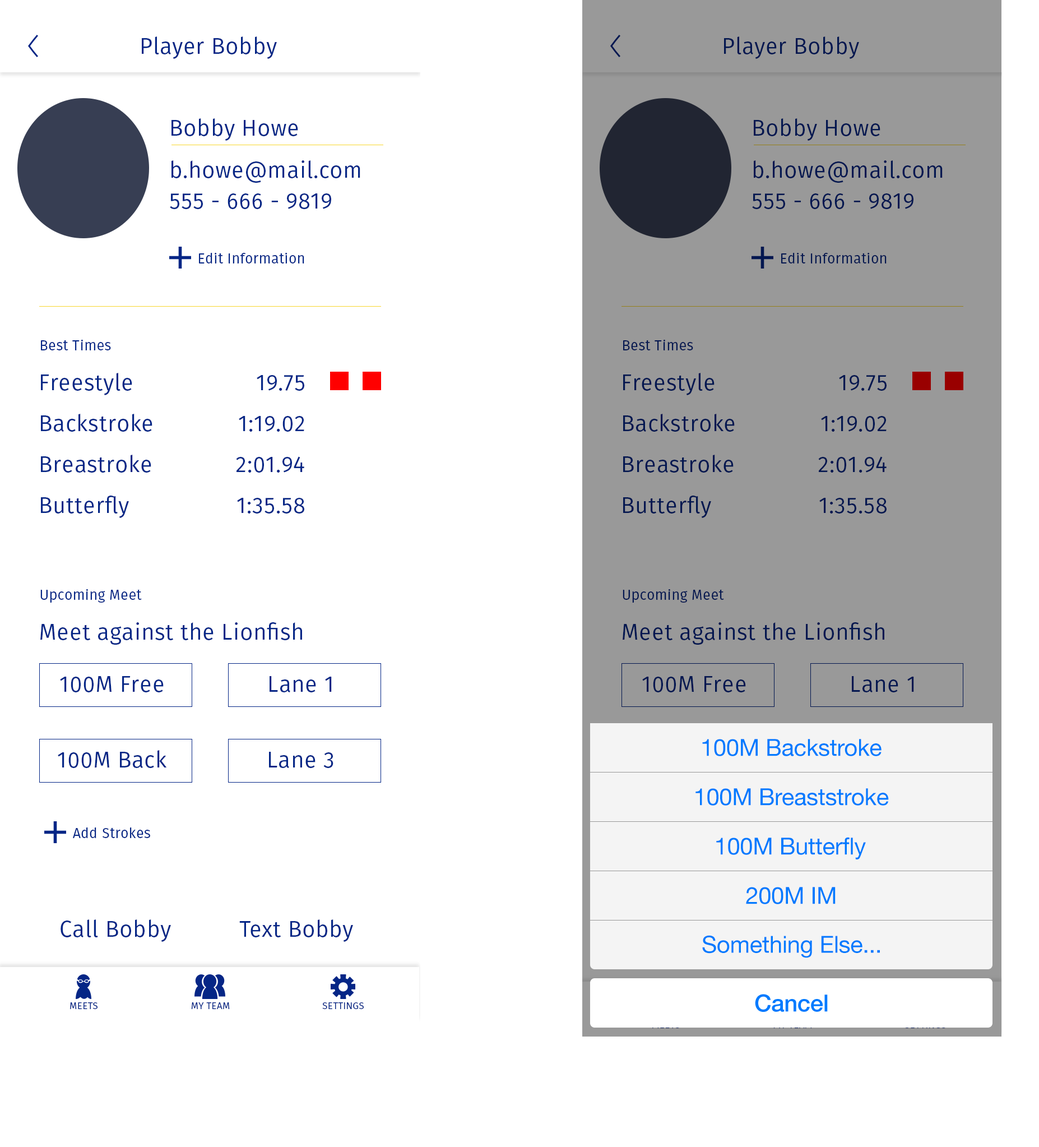
<style>
.page{position:relative;width:1039px;height:1147px;background:#ffffff}
.page>*{position:absolute;margin:0}
.t1{font:22.4px "FiraSans-Book";letter-spacing:0.02em;color:#052686}
.t2{font:22.4px "FiraSans-Book";letter-spacing:0.02em;color:#031750}
.t3{font:22.4px/19.6px "FiraSans-Book";letter-spacing:0.02em;color:#052686}
.t4{font:22.4px/19.6px "FiraSans-Book";letter-spacing:0.02em;color:#031750}
.t5{font:14px "FiraSans-Book";letter-spacing:0.02em;color:#052686}
.t6{font:14px "FiraSans-Book";letter-spacing:0.02em;color:#031750}
.t7{font:23.5px "HelveticaNeue";letter-spacing:-0.01em;color:#007aff}
.t8{font:23.5px "HelveticaNeue-Medium";letter-spacing:-0.01em;color:#007aff}
.t9{font:9.5px "FiraSans-Book";letter-spacing:0.02em;color:#052686;text-transform:uppercase}
</style>
<div class="page">
<p class="t1" style="left:142px;top:36px;width:135px;height:23px">Player Bobby</p>
<p class="t2" style="left:724px;top:36px;width:136px;height:23px">Player Bobby</p>
<p class="t3" style="left:170px;top:118px;width:191px;height:91px">Bobby Howe<br>b.howe@mail.com<br>555 - 666 - 9819</p>
<p class="t4" style="left:752px;top:118px;width:191px;height:91px">Bobby Howe<br>b.howe@mail.com<br>555 - 666 - 9819</p>
<p class="t5" style="left:199px;top:252px;width:105px;height:12px">Edit Information</p>
<p class="t6" style="left:782px;top:252px;width:105px;height:12px">Edit Information</p>
<p class="t5" style="left:41px;top:339px;width:70px;height:11px">Best Times</p>
<p class="t6" style="left:623px;top:339px;width:71px;height:11px">Best Times</p>
<p class="t1" style="left:41px;top:373px;width:91px;height:22px">Freestyle</p>
<p class="t1" style="left:257px;top:375px;width:47px;height:16px">19.75</p>
<p class="t2" style="left:623px;top:373px;width:92px;height:22px">Freestyle</p>
<p class="t2" style="left:839px;top:375px;width:48px;height:16px">19.75</p>
<p class="t1" style="left:41px;top:414px;width:112px;height:18px">Backstroke</p>
<p class="t2" style="left:623px;top:414px;width:112px;height:18px">Backstroke</p>
<p class="t1" style="left:239px;top:416px;width:65px;height:16px">1:19.02</p>
<p class="t2" style="left:821px;top:416px;width:66px;height:16px">1:19.02</p>
<p class="t1" style="left:41px;top:455px;width:110px;height:18px">Breastroke</p>
<p class="t1" style="left:236px;top:456px;width:68px;height:17px">2:01.94</p>
<p class="t2" style="left:623px;top:455px;width:111px;height:18px">Breastroke</p>
<p class="t2" style="left:819px;top:456px;width:68px;height:17px">2:01.94</p>
<p class="t1" style="left:41px;top:496px;width:88px;height:22px">Butterfly</p>
<p class="t1" style="left:237px;top:498px;width:67px;height:16px">1:35.58</p>
<p class="t2" style="left:623px;top:496px;width:88px;height:22px">Butterfly</p>
<p class="t2" style="left:820px;top:498px;width:67px;height:16px">1:35.58</p>
<p class="t5" style="left:40px;top:589px;width:102px;height:14px">Upcoming Meet</p>
<p class="t6" style="left:623px;top:589px;width:101px;height:14px">Upcoming Meet</p>
<p class="t1" style="left:40px;top:622px;width:262px;height:23px">Meet against the Lionfish</p>
<p class="t2" style="left:623px;top:622px;width:262px;height:23px">Meet against the Lionfish</p>
<p class="t1" style="left:60px;top:676px;width:104px;height:16px">100M Free</p>
<p class="t1" style="left:270px;top:676px;width:62px;height:16px">Lane 1</p>
<p class="t2" style="left:643px;top:676px;width:103px;height:16px">100M Free</p>
<p class="t2" style="left:852px;top:676px;width:62px;height:16px">Lane 1</p>
<p class="t7" style="left:703px;top:739px;width:179px;height:17px">100M Backstroke</p>
<p class="t1" style="left:58px;top:750px;width:109px;height:18px">100M Back</p>
<p class="t1" style="left:269px;top:752px;width:65px;height:16px">Lane 3</p>
<p class="t7" style="left:696px;top:788px;width:193px;height:18px">100M Breaststroke</p>
<p class="t5" style="left:73px;top:828px;width:77px;height:10px">Add Strokes</p>
<p class="t7" style="left:717px;top:837px;width:149px;height:23px">100M Butterfly</p>
<p class="t7" style="left:746px;top:887px;width:90px;height:17px">200M IM</p>
<p class="t1" style="left:61px;top:920px;width:110px;height:22px">Call Bobby</p>
<p class="t1" style="left:239px;top:920px;width:114px;height:22px">Text Bobby</p>
<p class="t7" style="left:703px;top:935px;width:177px;height:23px">Something Else...</p>
<p class="t8" style="left:755px;top:994px;width:73px;height:18px">Cancel</p>
<p class="t9" style="left:70px;top:1002px;width:28px;height:7px">Meets</p>
<p class="t9" style="left:191px;top:1002px;width:39px;height:7px">My Team</p>
<p class="t9" style="left:322px;top:1002px;width:42px;height:7px">Settings</p>
</div>
